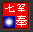
<style>
.page{position:relative;width:33px;height:32px;background:#f20000}
.page>*{position:absolute;margin:0}
.t1{font:10.4px "SimSun";color:#ffffff}
.t2{font:11.7px "SimSun";color:#ffffff}
</style>
<div class="page">
<p class="t1" style="left:5px;top:4px;width:20px;height:8px">七军</p>
<p class="t2" style="left:16px;top:15px;width:11px;height:12px">奉</p>
</div>
